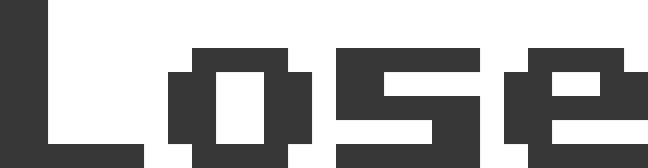
<style>
.page{position:relative;width:648px;height:168px;background:#ffffff}
.page>*{position:absolute;margin:0}
.t1{font:216px "PixeloidSans-Bold";color:#373737}
</style>
<div class="page">
<p class="t1" style="left:0px;top:0px;width:648px;height:168px">Lose</p>
</div>
